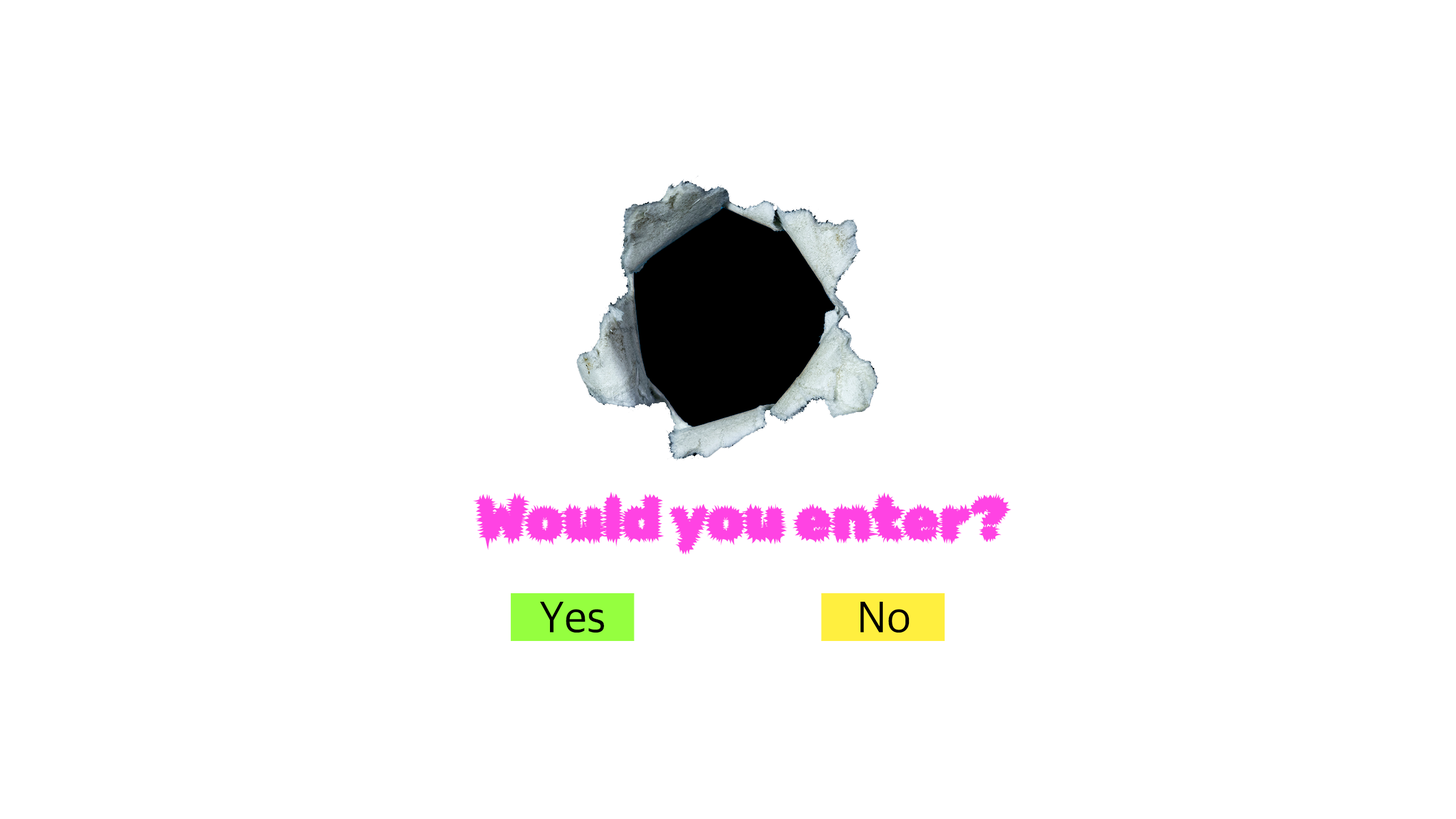
<style>
.page{position:relative;width:1456px;height:819px;background:#ffffff}
.page>*{position:absolute;margin:0}
.t1{font:58.8px "RubikBeastly-Regular";color:#ff43e3}
.t2{font:45.5px "AppleSDGothicNeoR00";color:#000000}
</style>
<div class="page">
<p class="t1" style="left:473px;top:491px;width:538px;height:64px">Would you enter?</p>
<p class="t2" style="left:540px;top:602px;width:64px;height:31px">Yes</p>
<p class="t2" style="left:861px;top:602px;width:48px;height:31px">No</p>
</div>
